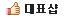
<style>
.page{position:relative;width:67px;height:18px;background:#ffffff}
.page>*{position:absolute;margin:0}
.t1{font:12px "morris9";color:#212121;font-weight:bold}
</style>
<div class="page">
<p class="t1" style="left:25px;top:4px;width:33px;height:10px">대표샵</p>
</div>
